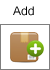
<style>
.page{position:relative;width:50px;height:70px;background:#ffffff}
.page>*{position:absolute;margin:0}
.t1{font:12px "MicrosoftSansSerif";color:#010101}
</style>
<div class="page">
<p class="t1" style="left:13px;top:6px;width:21px;height:10px">Add</p>
</div>
